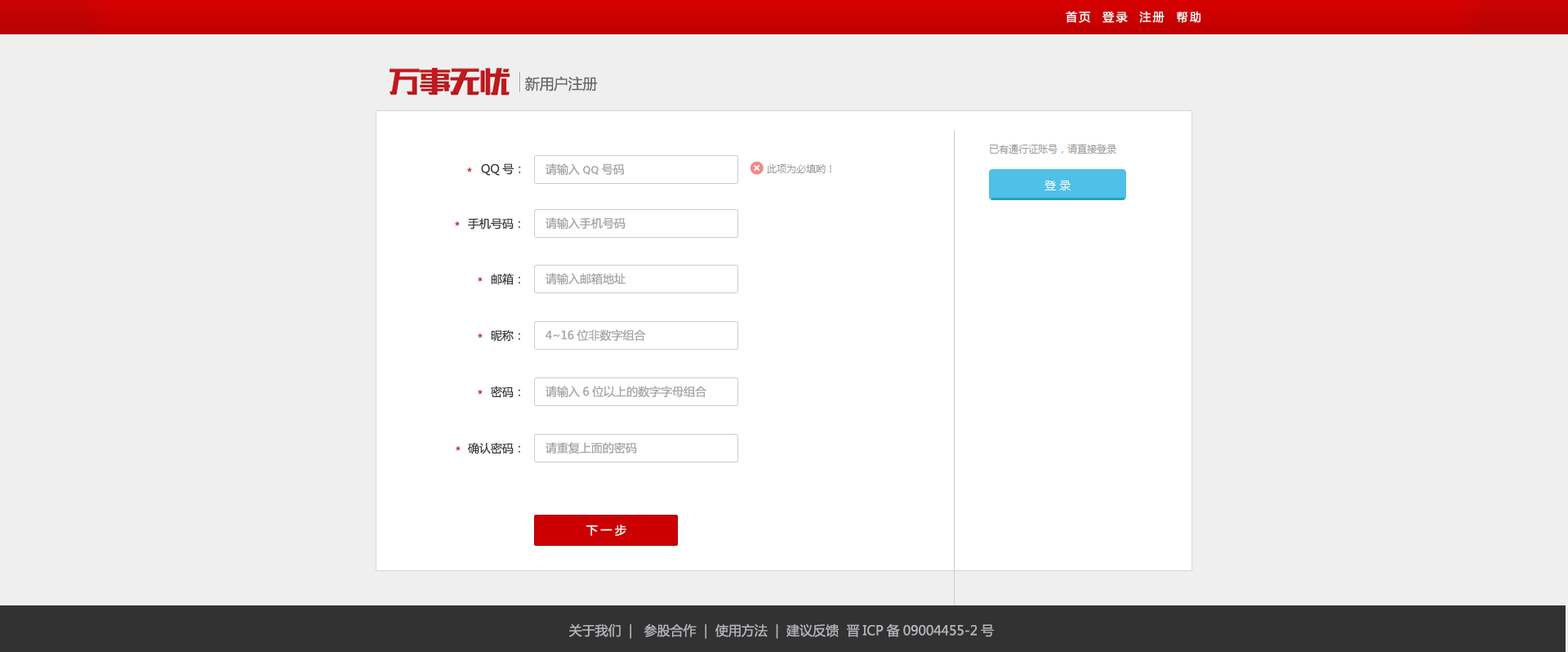
<style>
.page{position:relative;width:1568px;height:652px;background:#efefef}
.page>*{position:absolute;margin:0}
.t1{font:11.4px "MicrosoftYaHei";letter-spacing:0.16em;color:#ffffff}
.t2{font:14.7px "MicrosoftYaHei";letter-spacing:-0.02em;color:#666666}
.t3{font:11.4px "MicrosoftYaHei";color:#bf1a20}
.t4{font:11.4px "MicrosoftYaHei";color:#383838}
.t5{font:11.4px "MicrosoftYaHei";color:#a3a3a3}
.t6{font:11.4px "EstrangeloEdessa";color:#a3a3a3}
.t7{font:11.4px "MicrosoftYaHei";letter-spacing:0.26em;color:#ffffff}
.t8{font:13.1px "MicrosoftYaHei";color:#b3b5ba}
</style>
<div class="page">
<p class="t1" style="left:1066px;top:11px;width:134px;height:12px">首页  登录  注册  帮助</p>
<p class="t2" style="left:525px;top:76px;width:73px;height:15px">新用户注册</p>
<p class="t3" style="left:467px;top:167px;width:5px;height:5px">*</p>
<p class="t4" style="left:481px;top:163px;width:40px;height:13px">QQ号：</p>
<p class="t5" style="left:546px;top:163px;width:79px;height:13px">请输入<span class="t6">QQ</span>号码</p>
<p class="t3" style="left:455px;top:221px;width:5px;height:5px">*</p>
<p class="t4" style="left:468px;top:217px;width:52px;height:12px">手机号码：</p>
<p class="t5" style="left:546px;top:217px;width:80px;height:12px">请输入手机号码</p>
<p class="t3" style="left:478px;top:277px;width:5px;height:5px">*</p>
<p class="t4" style="left:491px;top:273px;width:29px;height:12px">邮箱：</p>
<p class="t5" style="left:546px;top:273px;width:80px;height:12px">请输入邮箱地址</p>
<p class="t4" style="left:491px;top:329px;width:29px;height:12px">昵称：</p>
<p class="t5" style="left:546px;top:329px;width:100px;height:12px">4~16位非数字组合</p>
<p class="t3" style="left:478px;top:333px;width:5px;height:5px">*</p>
<p class="t3" style="left:478px;top:390px;width:5px;height:4px">*</p>
<p class="t4" style="left:491px;top:385px;width:29px;height:13px">密码：</p>
<p class="t5" style="left:546px;top:385px;width:160px;height:13px">请输入6位以上的数字字母组合</p>
<p class="t3" style="left:456px;top:446px;width:5px;height:5px">*</p>
<p class="t4" style="left:467px;top:442px;width:53px;height:12px">确认密码：</p>
<p class="t5" style="left:546px;top:442px;width:91px;height:12px">请重复上面的密码</p>
<p class="t7" style="left:586px;top:524px;width:40px;height:12px">下一步</p>
<p class="t8" style="left:568px;top:623px;width:426px;height:16px">关于我们  |   参股合作  |  使用方法  |  建议反馈  晋ICP备09004455-2号</p>
</div>
